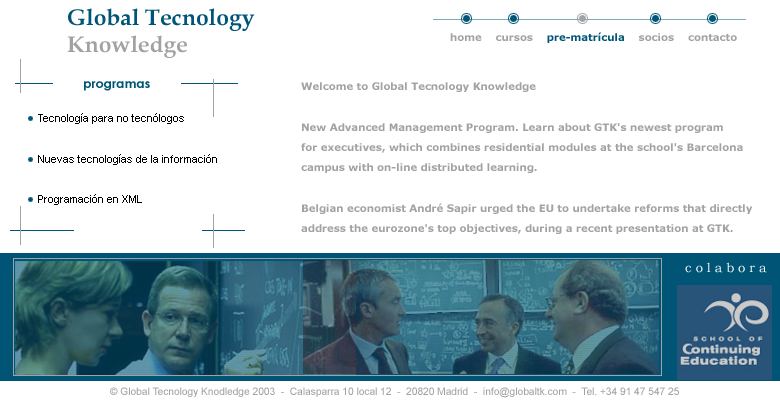
<style>
.page{position:relative;width:780px;height:400px;background:#ffffff}
.page>*{position:absolute;margin:0}
.t1{font:22.9px "BookAntiqua-Bold";color:#005577}
.t2{font:22.9px "BookAntiqua-Bold";color:#a2a2a2}
.t3{font:10.2px "Verdana-Bold";color:#a2a2a2}
.t4{font:10.2px "Verdana-Bold";color:#005577}
.t5{font:12.7px "CenturyGothic-Bold";color:#005577}
.t6{font:10.2px/20.3px "Verdana-Bold";color:#a2a2a2}
.t7{font:10.2px/20.3px "ArialMT";color:#000000}
.t8{font:12.7px "BookmanOldStyle";color:#ffffff}
.t9{font:10.2px "ArialMT";color:#a2a2a2}
</style>
<div class="page">
<p class="t1" style="left:67px;top:8px;width:188px;height:50px">Global Tecnology<br><span class="t2">Knowledge</span></p>
<p class="t3" style="left:450px;top:32px;width:287px;height:11px">home    cursos    <span class="t4">pre-matrícula</span>    socios    contacto</p>
<p class="t5" style="left:84px;top:81px;width:66px;height:10px">programas</p>
<p class="t6" style="left:301px;top:82px;width:452px;height:152px">Welcome to Global Tecnology Knowledge<br><br>New Advanced Management Program. Learn about GTK's newest program <br>for executives, which combines residential modules at the school's Barcelona <br>campus with on-line distributed learning. <br><br>Belgian economist André Sapir urged the EU to undertake reforms that directly <br>address the eurozone's top objectives, during a recent presentation at GTK.</p>
<p class="t7" style="left:38px;top:113px;width:179px;height:92px">Tecnología para no tecnólogos<br><br>Nuevas tecnologías de la información<br><br>Programación en XML</p>
<p class="t8" style="left:685px;top:262px;width:82px;height:11px">c o l a b o r a</p>
<p class="t9" style="left:110px;top:387px;width:569px;height:11px">© Global Tecnology Knodledge 2003  -  Calasparra 10 local 12  -  20820 Madrid  -  info@globaltk.com  -  Tel. +34 91 47 547 25</p>
</div>
